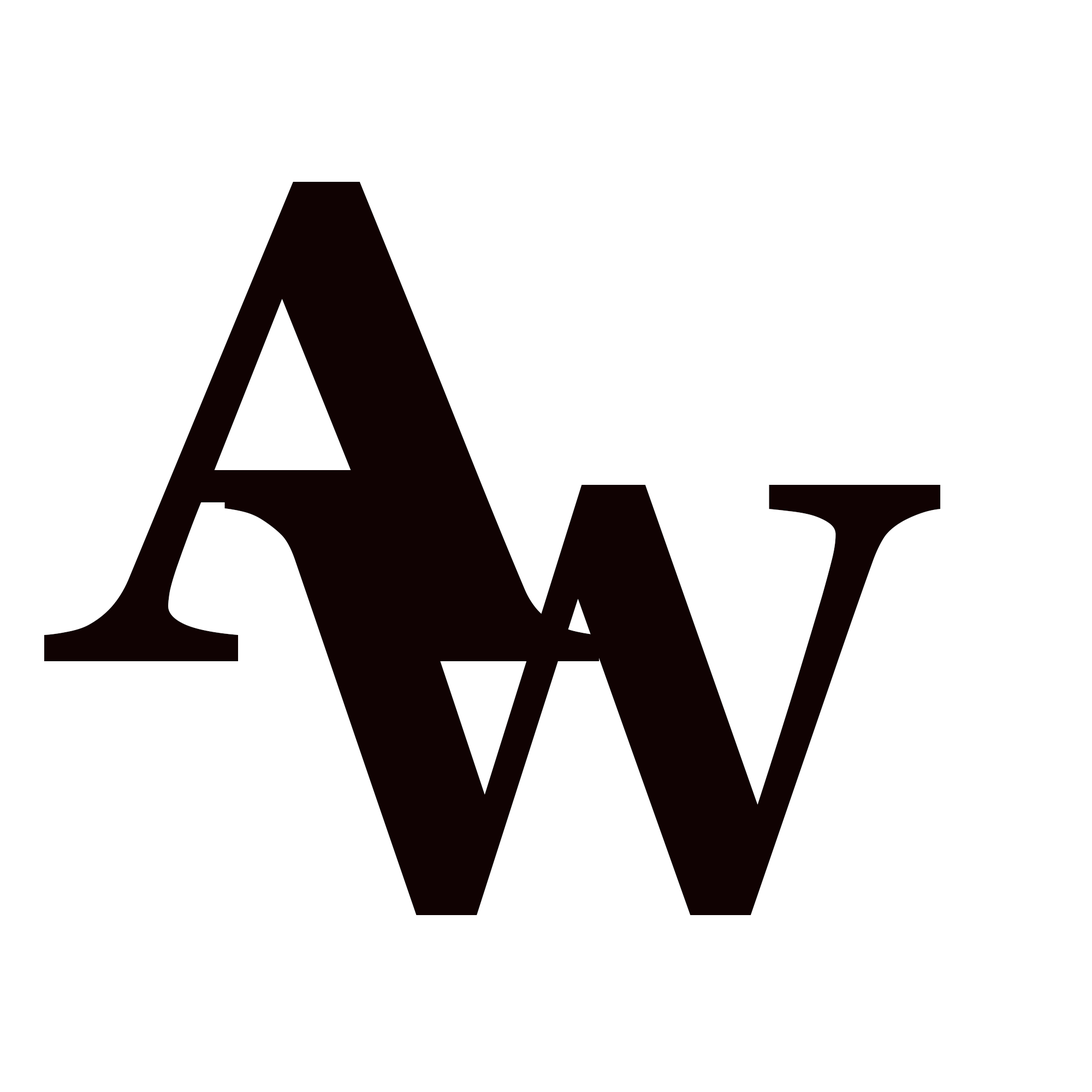
<style>
.page{position:relative;width:1092px;height:1092px;background:#ffffff}
.page>*{position:absolute;margin:0}
.t1{font:682.5px "Georgia-Bold";letter-spacing:-0.01em;color:#100202}
.t2{font:614.2px "Georgia-Bold";letter-spacing:-0.01em;color:#100202}
</style>
<div class="page">
<p class="t1" style="left:44px;top:182px;width:556px;height:479px">A</p>
<p class="t2" style="left:224px;top:485px;width:717px;height:430px">W</p>
</div>
